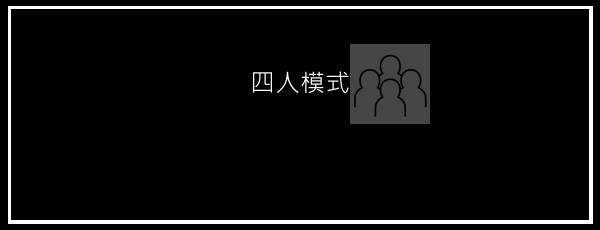
<style>
.page{position:relative;width:600px;height:230px;background:#000000}
.page>*{position:absolute;margin:0}
.t1{font:24.3px "MicrosoftJhengHeiRegular";color:#ffffff}
</style>
<div class="page">
<p class="t1" style="left:253px;top:71px;width:96px;height:23px">四人模式</p>
</div>
